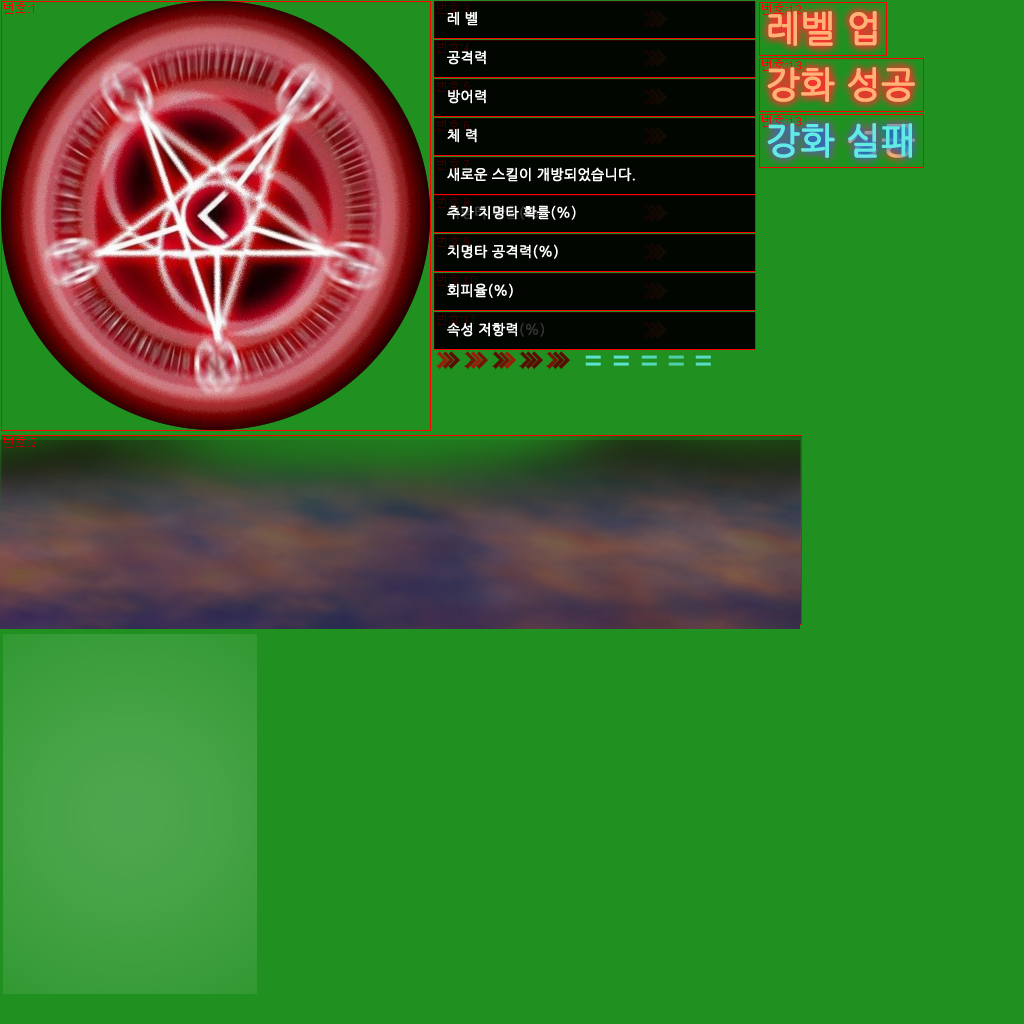
<style>
.page{position:relative;width:1024px;height:1024px;background:#209020}
.page>*{position:absolute;margin:0}
.t1{font:14px "NanumGothic";color:#ffffff;font-weight:bold}
.t2{font:36px "NanumGothic";color:#fdb276;font-weight:bold}
.t3{font:36px "NanumGothic";color:#61ebe3;font-weight:bold}
</style>
<div class="page">
<p class="t1" style="left:447px;top:11px;width:31px;height:15px">레 벨</p>
<p class="t2" style="left:768px;top:11px;width:109px;height:35px">레벨 업</p>
<p class="t1" style="left:447px;top:50px;width:39px;height:15px">공격력</p>
<p class="t2" style="left:767px;top:67px;width:148px;height:35px">강화 성공</p>
<p class="t1" style="left:448px;top:89px;width:38px;height:15px">방어력</p>
<p class="t3" style="left:767px;top:123px;width:145px;height:35px">강화 실패</p>
<p class="t1" style="left:447px;top:128px;width:30px;height:15px">체 력</p>
<p class="t1" style="left:447px;top:167px;width:188px;height:15px">새로운 스킬이 개방되었습니다.</p>
<p class="t1" style="left:447px;top:205px;width:129px;height:15px">추가 치명타 확률(%)</p>
<p class="t1" style="left:447px;top:244px;width:111px;height:15px">치명타 공격력(%)</p>
<p class="t1" style="left:447px;top:283px;width:66px;height:15px">회피율(%)</p>
<p class="t1" style="left:447px;top:322px;width:70px;height:15px">속성 저항력</p>
</div>
